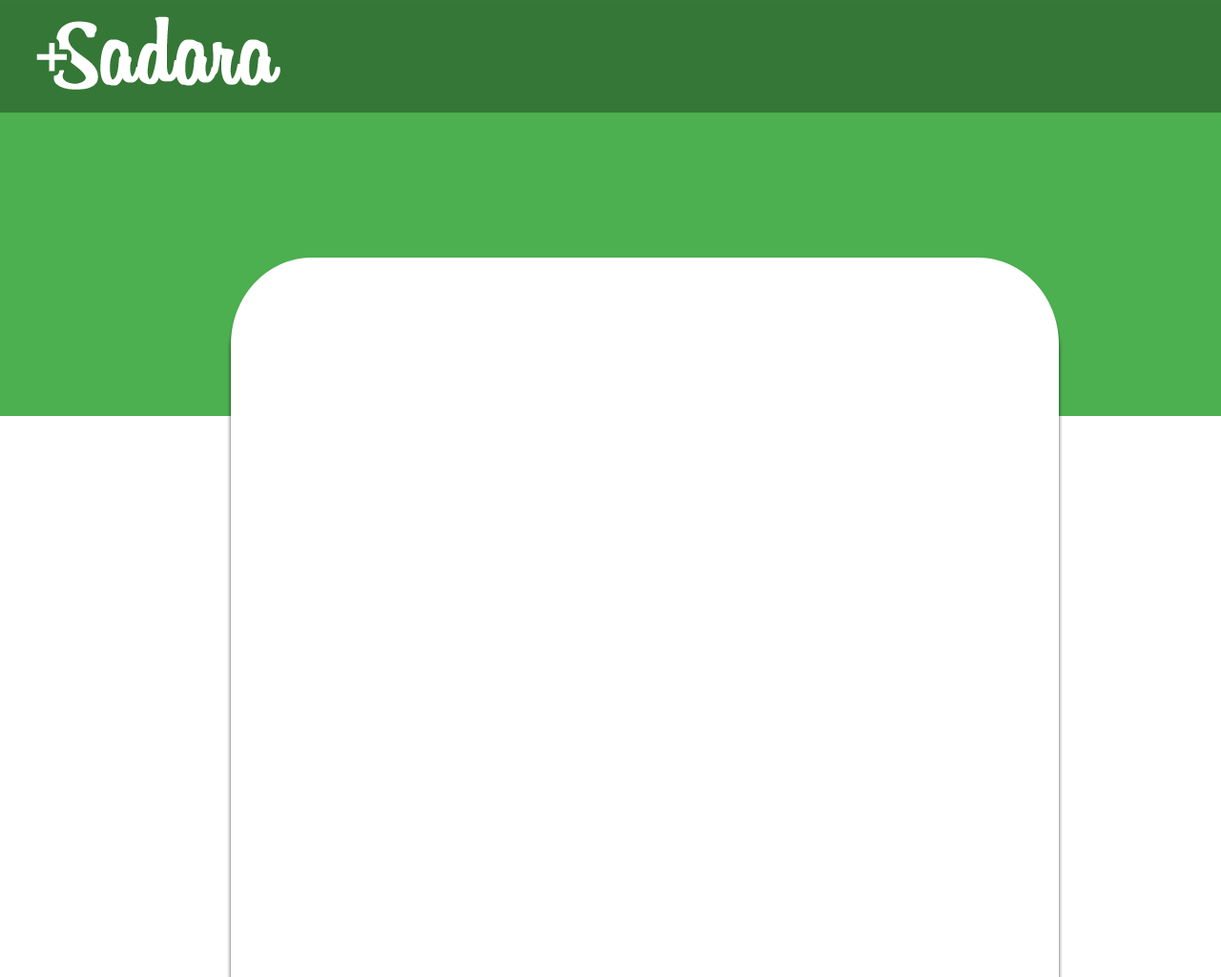
<style>
.page{position:relative;width:1221px;height:977px;background:#ffffff}
.page>*{position:absolute;margin:0}
.t1{font:95.4px "Billabong";color:#ffffff;font-weight:bold}
.t2{font:66.8px "LeagueGothic-Regular";color:#ffffff}
</style>
<div class="page">
<p class="t1" style="left:53px;top:16px;width:227px;height:74px">Sadara</p>
<p class="t2" style="left:36px;top:43px;width:31px;height:29px">+</p>
</div>
